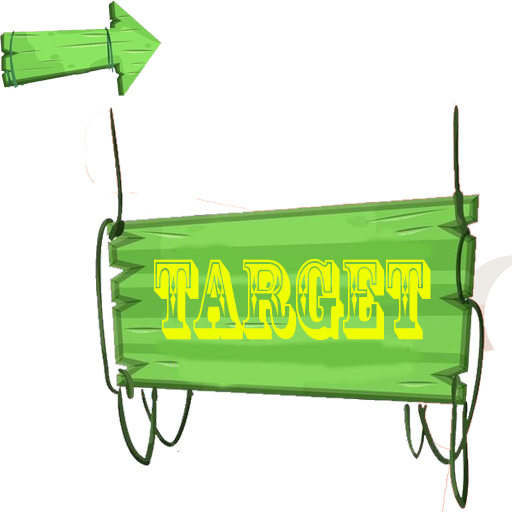
<style>
.page{position:relative;width:512px;height:512px;background:#ffffff}
.page>*{position:absolute;margin:0}
.t1{font:104.6px "RosewoodStd-Regular";color:#f0ff00;scale:0.78 1}
</style>
<div class="page">
<p class="t1" style="left:154px;top:259px;width:277px;height:82px">Target</p>
</div>
